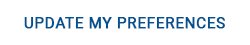
<style>
.page{position:relative;width:250px;height:45px;background:#ffffff}
.page>*{position:absolute;margin:0}
.t1{font:15px "Roboto-Regular";letter-spacing:0.03em;color:#005191;text-transform:uppercase;font-weight:bold}
</style>
<div class="page">
<p class="t1" style="left:24px;top:17px;width:201px;height:12px">Update MY Preferences</p>
</div>
